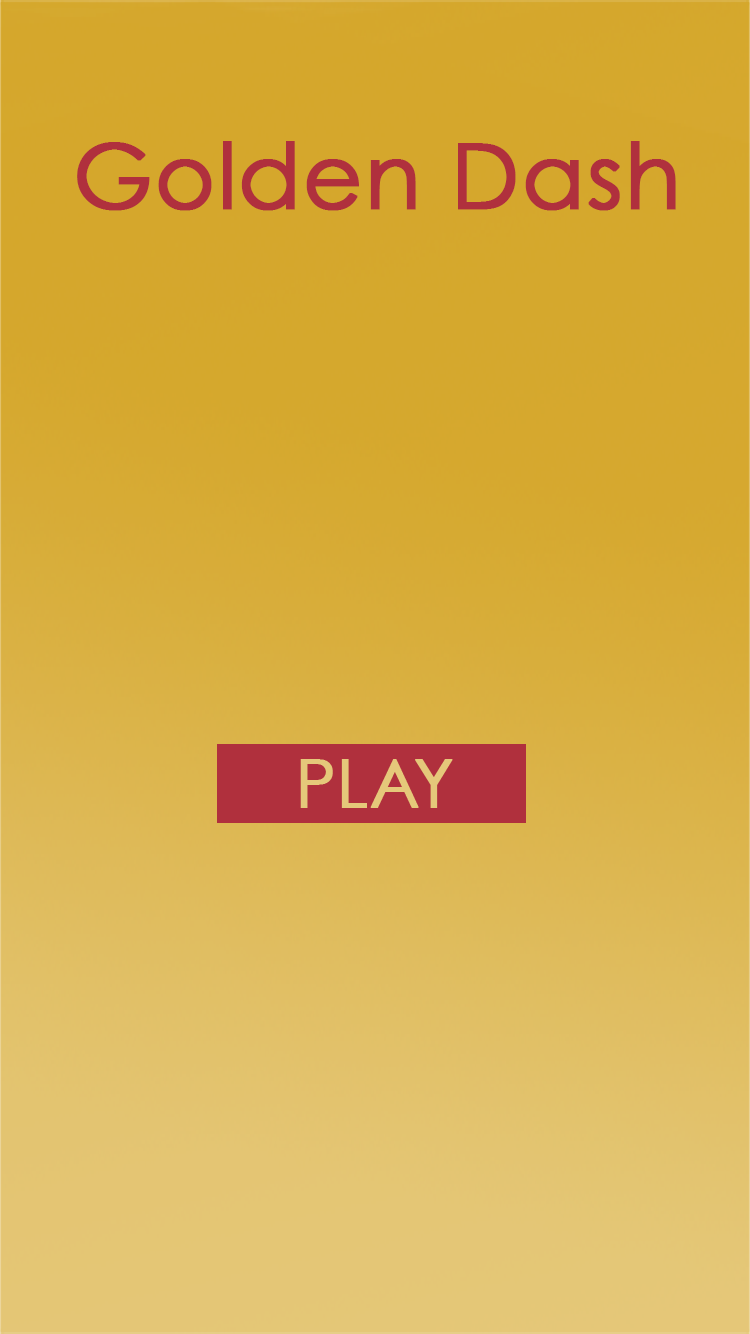
<style>
.page{position:relative;width:750px;height:1334px}
.page>*{position:absolute;margin:0}
.t1{font:90.9px "CenturyGothic";color:#b0303d;font-weight:bold}
</style>
<div class="page">
<p class="t1" style="left:77px;top:141px;width:599px;height:70px">Golden Dash</p>
</div>
